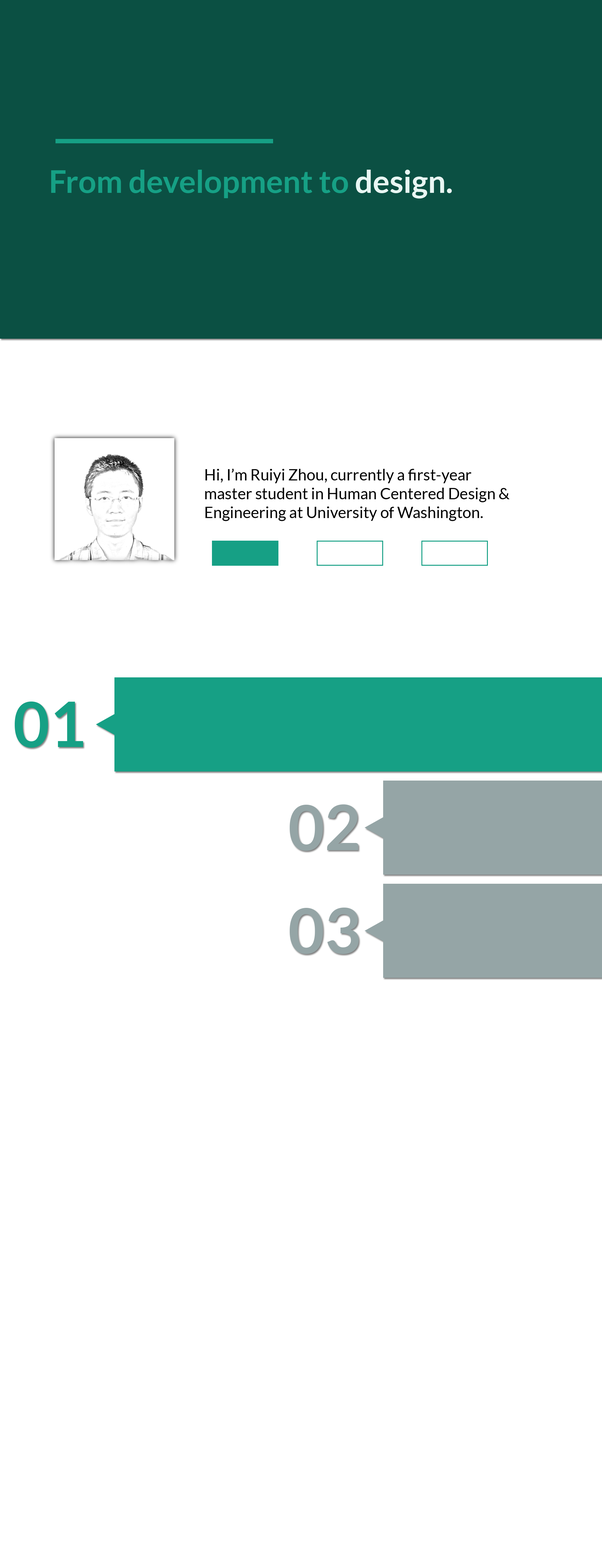
<style>
.page{position:relative;width:602px;height:1568px;background:#ffffff}
.page>*{position:absolute;margin:0}
.t1{font:31.4px "Lato-Bold";color:#16a085}
.t2{font:31.4px "Lato-Bold";color:#e8f6f3}
.t3{font:15.7px "Lato-Regular";color:#000000}
.t4{font:62.7px "Lato-Bold";color:#16a085}
.t5{font:62.7px "Lato-Bold";color:#95a5a6}
</style>
<div class="page">
<p class="t1" style="left:51px;top:170px;width:401px;height:29px">From development to<span class="t2"> design.</span></p>
<p class="t3" style="left:205px;top:469px;width:305px;height:52px">Hi, I’m Ruiyi Zhou, currently a first-year master student in Human Centered Design &amp; Engineering at University of Washington.</p>
<p class="t4" style="left:15px;top:702px;width:68px;height:46px">01</p>
<p class="t5" style="left:290px;top:804px;width:68px;height:47px">02</p>
<p class="t5" style="left:290px;top:908px;width:69px;height:46px">03</p>
</div>
